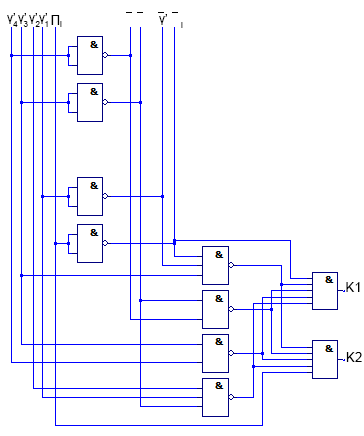
<style>
.page{position:relative;width:364px;height:436px;background:#ffffff}
.page>*{position:absolute;margin:0}
.t1{font:12px "ArialMT";color:#000000}
.t2{font:13.3px "ArialMT";color:#000000}
.t3{font:8px "ArialMT";color:#000000}
.t4{font:8px "ArialMT"}
</style>
<div class="page">
<p class="t1" style="left:7px;top:13px;width:8px;height:11px">γ’</p>
<p class="t1" style="left:18px;top:13px;width:8px;height:11px">γ’</p>
<p class="t1" style="left:29px;top:13px;width:8px;height:11px">γ’</p>
<p class="t1" style="left:39px;top:13px;width:8px;height:11px">γ’</p>
<p class="t2" style="left:51px;top:15px;width:9px;height:10px">П</p>
<p class="t1" style="left:159px;top:14px;width:8px;height:11px">γ’</p>
<p class="t3" style="left:13px;top:21px;width:5px;height:6px">4</p>
<p class="t3" style="left:23px;top:21px;width:5px;height:6px">3</p>
<p class="t3" style="left:35px;top:21px;width:5px;height:6px">2</p>
<p class="t4" style="left:45px;top:21px;width:3px;height:6px">1</p>
<p class="t4" style="left:60px;top:21px;width:2px;height:6px">i</p>
<p class="t4" style="left:181px;top:22px;width:2px;height:6px">i</p>
<p class="t2" style="left:346px;top:282px;width:14px;height:10px">K1</p>
<p class="t2" style="left:346px;top:352px;width:16px;height:10px">K2</p>
</div>
